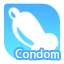
<style>
.page{position:relative;width:64px;height:64px;background:#ffffff}
.page>*{position:absolute;margin:0}
.t1{font:12px "JK-Gothic-M";color:#ffffff}
</style>
<div class="page">
<p class="t1" style="left:15px;top:49px;width:44px;height:10px">Condom</p>
</div>
